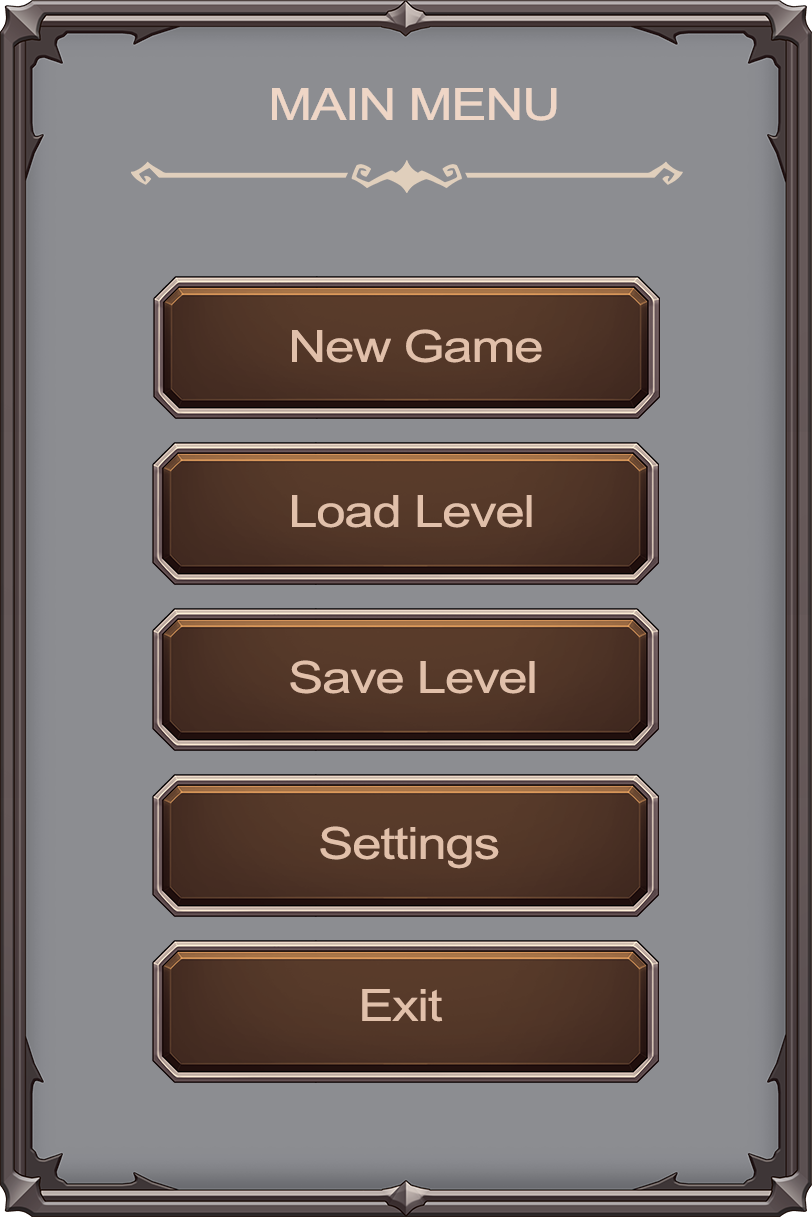
<style>
.page{position:relative;width:812px;height:1217px;background:#8c8d91}
.page>*{position:absolute;margin:0}
.t1{font:44.1px "ArialMT";letter-spacing:-0.025em;color:#efd6c6;scale:1.2 1}
.t2{font:44.1px "ArialMT";letter-spacing:-0.025em;color:#e1c0aa;scale:1.2 1}
</style>
<div class="page">
<p class="t1" style="left:272px;top:88px;width:285px;height:33px">MAIN MENU</p>
<p class="t2" style="left:292px;top:329px;width:250px;height:34px">New Game</p>
<p class="t2" style="left:292px;top:495px;width:240px;height:33px">Load Level</p>
<p class="t2" style="left:290px;top:660px;width:245px;height:34px">Save Level</p>
<p class="t2" style="left:320px;top:826px;width:179px;height:43px">Settings</p>
<p class="t2" style="left:362px;top:989px;width:81px;height:33px">Exit</p>
</div>
